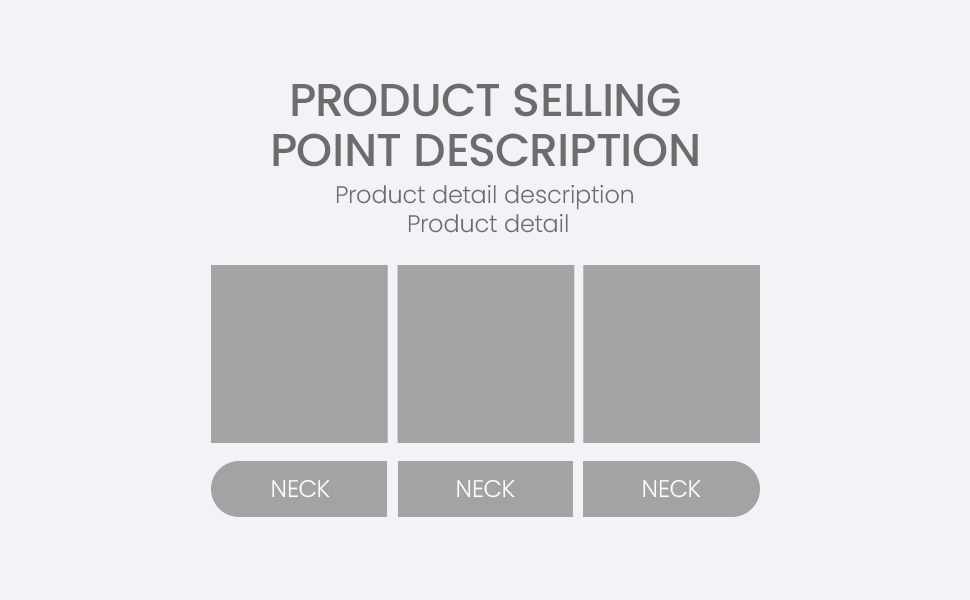
<style>
.page{position:relative;width:970px;height:600px;background:#f2f3f6}
.page>*{position:absolute;margin:0}
.t1{font:46px/50px "Poppins-Medium";color:#6c6c6c;text-transform:uppercase}
.t2{font:24px "Poppins-Light";color:#6c6c6c}
.t3{font:24px "Poppins-Light";color:#ffffff}
</style>
<div class="page">
<p class="t1" style="left:273px;top:83px;width:425px;height:84px;text-align:center">Product selling<br>point description</p>
<p class="t2" style="left:336px;top:184px;width:298px;height:49px;text-align:center">Product detail description <br>Product detail</p>
<p class="t3" style="left:272px;top:479px;width:58px;height:19px">NECK</p>
<p class="t3" style="left:457px;top:479px;width:58px;height:19px">NECK</p>
<p class="t3" style="left:643px;top:479px;width:58px;height:19px">NECK</p>
</div>
